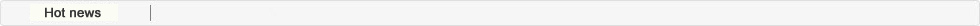
<style>
.page{position:relative;width:980px;height:26px;background:#f6f6f6}
.page>*{position:absolute;margin:0}
.t1{font:13px "ArialMT";color:#373737;font-weight:bold}
</style>
<div class="page">
<p class="t1" style="left:45px;top:7px;width:56px;height:11px">Hot news</p>
</div>
